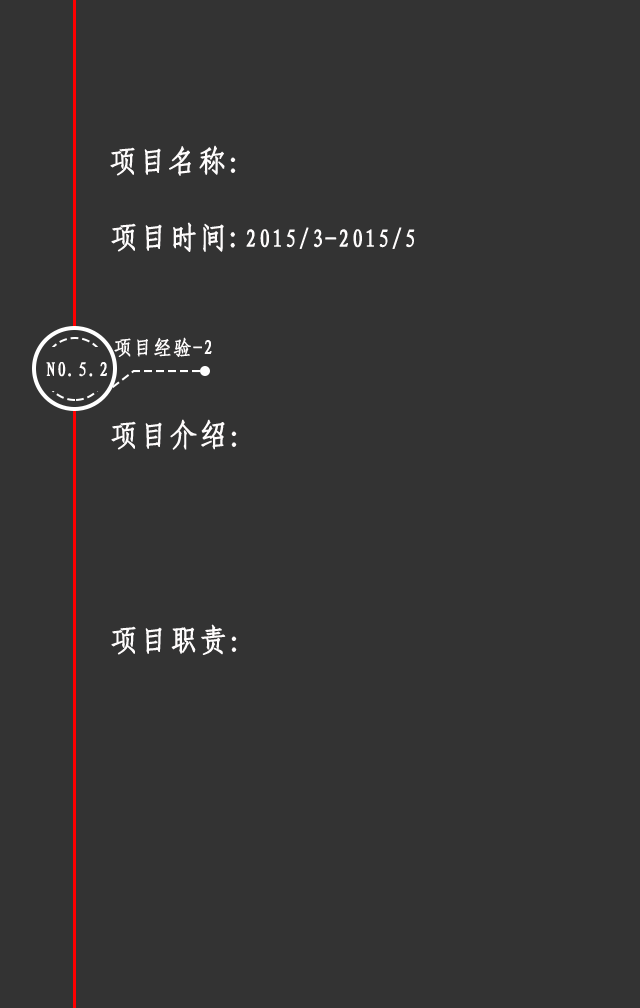
<style>
.page{position:relative;width:640px;height:1008px;background:#333333}
.page>*{position:absolute;margin:0}
.t1{font:30px "-G-s-u-n-0-0-m";letter-spacing:0.05em;color:#fefcfc;font-weight:bold;scale:0.92 1}
.t2{font:25px "-G-s-u-n-0-0-m";letter-spacing:0.05em;color:#fefcfc;font-weight:bold;scale:0.92 1}
.t3{font:20px "-G-s-u-n-0-0-m";letter-spacing:0.05em;color:#fefcfc;font-weight:bold;scale:0.92 1}
</style>
<div class="page">
<p class="t1" style="left:110px;top:145px;width:126px;height:31px">项目名称：</p>
<p class="t2" style="left:111px;top:222px;width:304px;height:30px"><span class="t1">项目时间:</span>2015/3-2015/5</p>
<p class="t3" style="left:114px;top:337px;width:98px;height:20px">项目经验-2</p>
<p class="t3" style="left:46px;top:362px;width:61px;height:15px">N0.5.2</p>
<p class="t1" style="left:111px;top:419px;width:126px;height:31px">项目介绍：</p>
<p class="t1" style="left:111px;top:624px;width:126px;height:31px">项目职责：</p>
</div>
